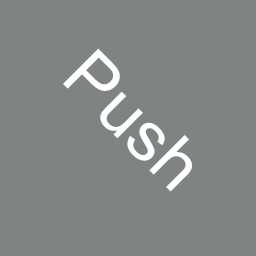
<style>
.page{position:relative;width:256px;height:256px;background:#7f8480}
.page>*{position:absolute;margin:0}
.t1{font:69.6px "ArialMT";color:#ffffff}
</style>
<div class="page">
<p class="t1" style="left:63px;top:48px;width:129px;height:144px;rotate:45deg">Push</p>
</div>
